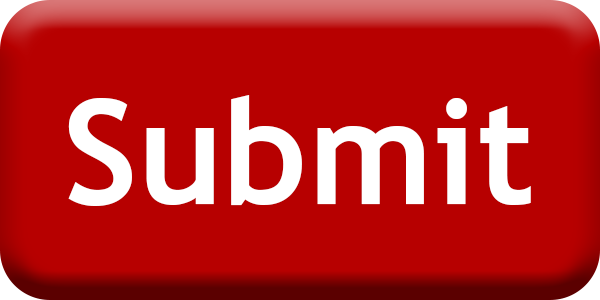
<style>
.page{position:relative;width:600px;height:300px;background:#b70000}
.page>*{position:absolute;margin:0}
.t1{font:145.8px "TrebuchetMS-Bold";color:#ffffff}
</style>
<div class="page">
<p class="t1" style="left:68px;top:95px;width:463px;height:111px">Submit</p>
</div>
